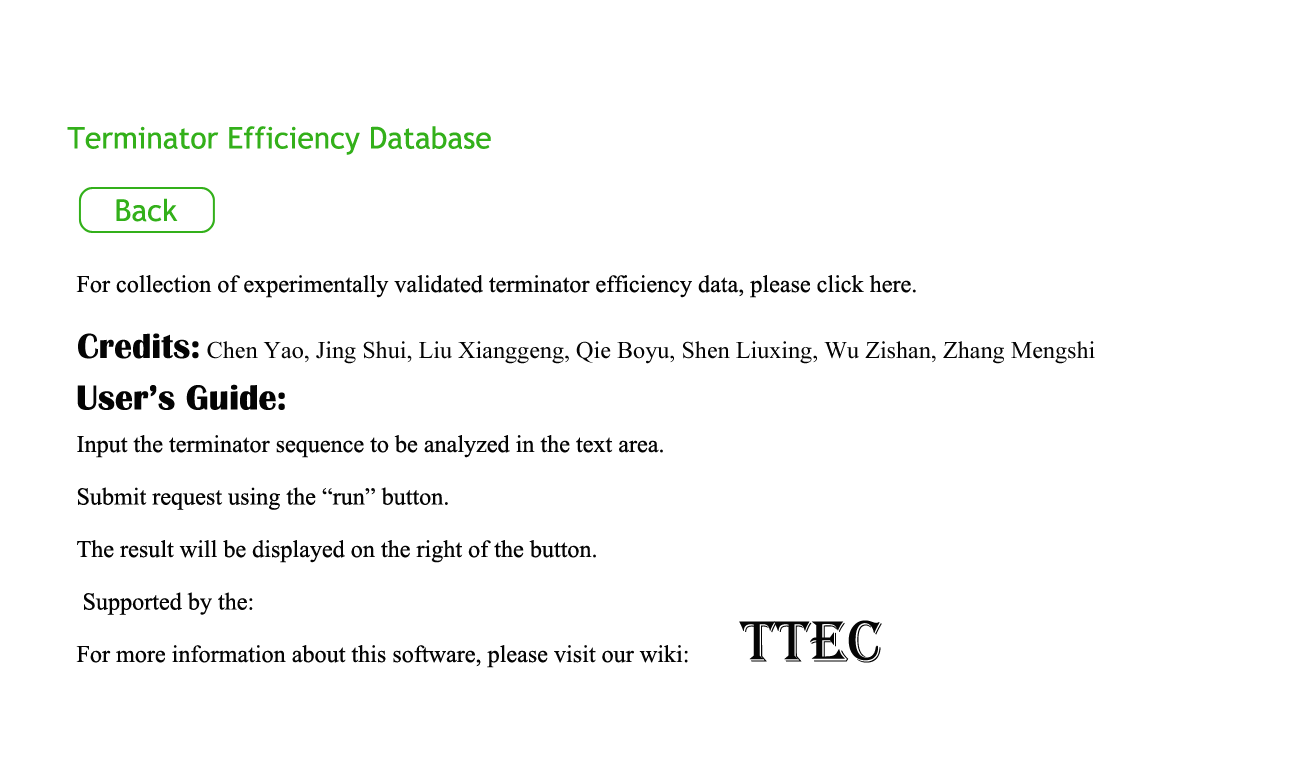
<style>
.page{position:relative;width:1300px;height:777px;background:#ffffff}
.page>*{position:absolute;margin:0}
.t1{font:30px "TrebuchetMS";color:#33b01a}
.t2{font:30px "Aparajita";color:#040404}
.t3{font:36px "BritannicBold";color:#040404}
.t4{font:60px "Algerian";color:#040404}
</style>
<div class="page">
<p class="t1" style="left:67px;top:126px;width:424px;height:29px">Terminator Efficiency Database</p>
<p class="t1" style="left:116px;top:198px;width:62px;height:24px">Back</p>
<p class="t2" style="left:76px;top:275px;width:840px;height:23px">For collection of experimentally validated terminator efficiency data, please click here.</p>
<p class="t2" style="left:78px;top:333px;width:1017px;height:31px"><span class="t3">Credits:</span> Chen Yao, Jing Shui, Liu Xianggeng, Qie Boyu, Shen Liuxing, Wu Zishan, Zhang Mengshi</p>
<p class="t3" style="left:77px;top:384px;width:208px;height:26px">User’s Guide:</p>
<p class="t2" style="left:76px;top:435px;width:612px;height:233px">Input the terminator sequence to be analyzed in the text area.<br>Submit request using the “run” button.<br>The result will be displayed on the right of the button.<br> Supported by the: <br>For more information about this software, please visit our wiki:</p>
<p class="t4" style="left:739px;top:620px;width:143px;height:43px">TTEC</p>
</div>
